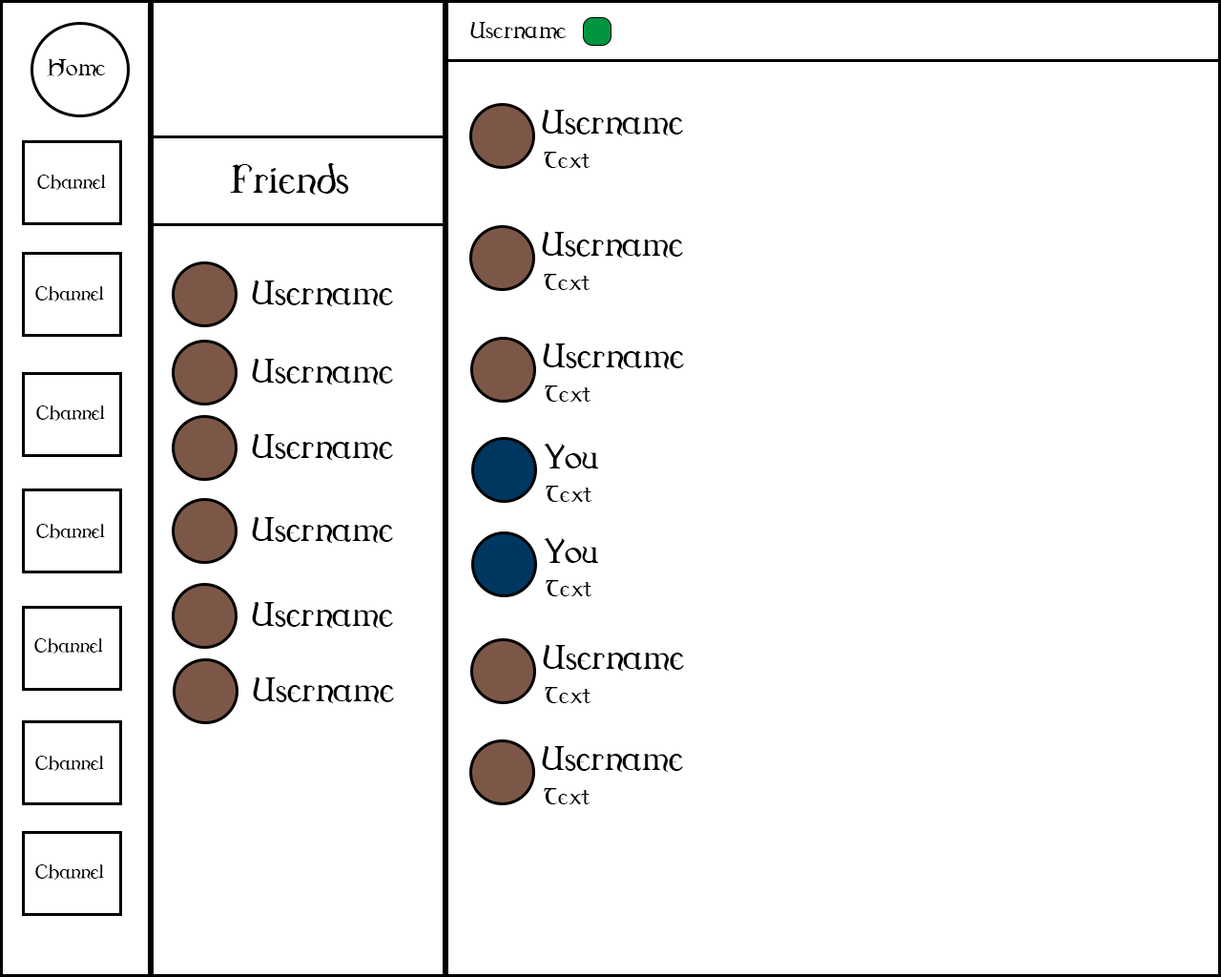
<style>
.page{position:relative;width:1221px;height:977px;background:#ffffff}
.page>*{position:absolute;margin:0}
.t1{font:34.3px "Dungeon";color:#000000}
.t2{font:50.5px "Dungeon";color:#000000}
.t3{font:58.3px "Dungeon";color:#000000}
.t4{font:28px "Dungeon";color:#000000}
</style>
<div class="page">
<p class="t1" style="left:470px;top:22px;width:97px;height:17px">Username</p>
<p class="t1" style="left:47px;top:59px;width:59px;height:17px">Home</p>
<p class="t2" style="left:542px;top:110px;width:141px;height:25px">Username</p>
<p class="t1" style="left:544px;top:152px;width:46px;height:16px">Text</p>
<p class="t3" style="left:230px;top:163px;width:119px;height:32px">Friends</p>
<p class="t4" style="left:37px;top:175px;width:69px;height:15px">Channel</p>
<p class="t2" style="left:542px;top:232px;width:141px;height:26px">Username</p>
<p class="t2" style="left:252px;top:280px;width:141px;height:26px">Username</p>
<p class="t1" style="left:544px;top:274px;width:46px;height:16px">Text</p>
<p class="t4" style="left:35px;top:286px;width:69px;height:15px">Channel</p>
<p class="t2" style="left:543px;top:343px;width:141px;height:26px">Username</p>
<p class="t2" style="left:252px;top:359px;width:141px;height:25px">Username</p>
<p class="t1" style="left:545px;top:385px;width:46px;height:17px">Text</p>
<p class="t4" style="left:36px;top:405px;width:69px;height:16px">Channel</p>
<p class="t2" style="left:252px;top:434px;width:141px;height:26px">Username</p>
<p class="t2" style="left:544px;top:444px;width:55px;height:24px">You</p>
<p class="t1" style="left:546px;top:485px;width:46px;height:17px">Text</p>
<p class="t2" style="left:252px;top:517px;width:141px;height:26px">Username</p>
<p class="t4" style="left:36px;top:524px;width:69px;height:15px">Channel</p>
<p class="t2" style="left:544px;top:538px;width:55px;height:25px">You</p>
<p class="t1" style="left:546px;top:580px;width:46px;height:16px">Text</p>
<p class="t2" style="left:252px;top:602px;width:141px;height:26px">Username</p>
<p class="t4" style="left:34px;top:638px;width:69px;height:15px">Channel</p>
<p class="t2" style="left:543px;top:645px;width:141px;height:26px">Username</p>
<p class="t2" style="left:253px;top:677px;width:141px;height:26px">Username</p>
<p class="t1" style="left:545px;top:687px;width:46px;height:16px">Text</p>
<p class="t2" style="left:542px;top:746px;width:141px;height:26px">Username</p>
<p class="t4" style="left:35px;top:755px;width:69px;height:16px">Channel</p>
<p class="t1" style="left:544px;top:788px;width:46px;height:16px">Text</p>
<p class="t4" style="left:35px;top:864px;width:69px;height:15px">Channel</p>
</div>
